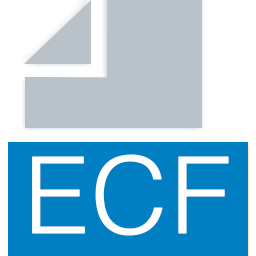
<style>
.page{position:relative;width:256px;height:256px;background:#007fc3}
.page>*{position:absolute;margin:0}
.t1{font:105.7px "Helvetica-Light";color:#ffffff;font-weight:bold}
</style>
<div class="page">
<p class="t1" style="left:32px;top:154px;width:197px;height:82px">ECF</p>
</div>
